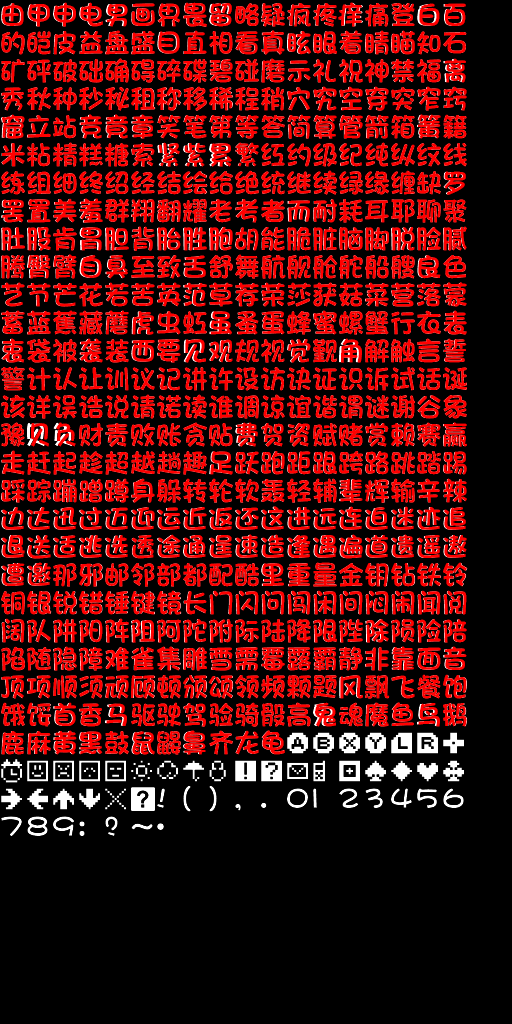
<style>
.page{position:relative;width:512px;height:1024px;background:#000000}
.page>*{position:absolute;margin:0}
.t1{font:26px/28px "DFPFangYuanW7";color:#ff0000}
</style>
<div class="page">
<p class="t1" style="left:1px;top:2px;width:466px;height:753px">由甲申电男画界畏留略疑疯疼痒痛登白百<br>的皑皮益盘盛目直相看真眩眼着睛瞄知石<br>矿砰破础确碍碎碟碧碰磨示礼祝神禁福离<br>秀秋种秒秘租称移稀程稍穴究空穿突窄窍<br>窟立站竞竟章笑笔第等答简算管箭箱簧籍<br>米粘精糕糖索紧紫累繁红约级纪纯纵纹线<br>练组细终绍经结绘给绝统继续绿缘缠缺罗<br>罢置美羞群翔翻耀老考者而耐耗耳耶聊聚<br>肚股肯胃胆背胎胜胞胡能脆脏脑脚脱脸腻<br>腾臀臂自臭至致舌舒舞航舰舱舵船艘良色<br>艺节芒花若苦英范草荐荣莎获菇菜营落蒙<br>蓄蓝蕉藏蘑虎虫虹虽蚤蛋蜂蜜螺蟹行衣表<br>衷袋被袭装西要见观规视觉觐角解触言誓<br>警计认让训议记讲许设访诀证识诉试话诞<br>该详误诰说请诺读谁调谅谊谐谓谜谢谷象<br>豫贝负财责败账贪贴费贺资赋赌赏赖赛赢<br>走赶起趁超越趟趣足跃跑距跟跨路跳踏踢<br>踩踪蹦蹭蹲身躲转轮软轰轻辅辈辉输辛辣<br>边达迅过迈迎运近返还这进远连迫迷迹追<br>退送适逃选透途通逞速造逢遇遍道遗遥遨<br>遭邀那邪邮邻部都配酷里重量金钥钻铁铃<br>铜银锐错锤键镜长门闪问闯闲间闷闹闻阅<br>阔队阱阳阵阻阿陀附际陆降限陛除陨险陪<br>陷随隐障难雀集雕雪需霉露霸静非靠面音<br>顶项顺须顽顾顿颁颂领频颗题风飘飞餐饱<br>饿馁首香马驱驶驾验骑骰高鬼魂魔鱼鸟鹅<br>鹿麻黄黑鼓鼠鼹鼻齐龙龟</p>
</div>
